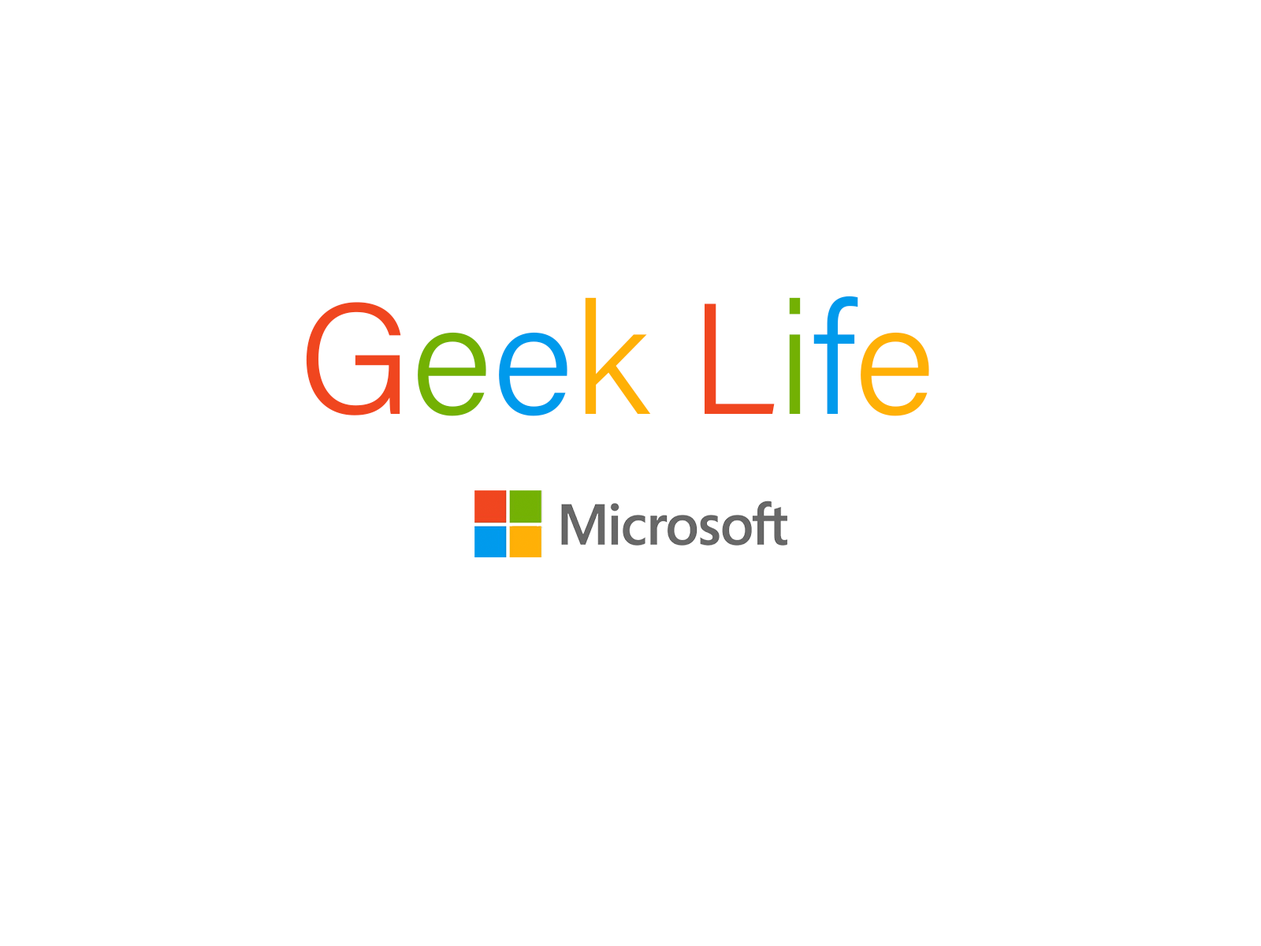
<style>
.page{position:relative;width:1261px;height:946px;background:#ffffff}
.page>*{position:absolute;margin:0}
.t1{font:157.6px "AcuminConcept-Light";color:#f0461f}
.t2{font:157.6px "AcuminConcept-Light";color:#73b103}
.t3{font:157.6px "AcuminConcept-Light";color:#009aec}
.t4{font:157.6px "AcuminConcept-Light";color:#ffb006}
</style>
<div class="page">
<p class="t1" style="left:306px;top:296px;width:623px;height:120px">G<span class="t2">e</span><span class="t3">e</span><span class="t4">k </span>L<span class="t2">i</span><span class="t3">f</span><span class="t4">e</span></p>
</div>
